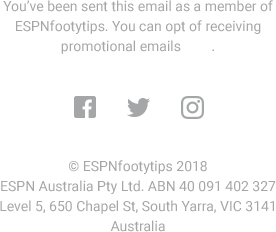
<style>
.page{position:relative;width:276px;height:232px;background:#ffffff}
.page>*{position:absolute;margin:0}
.t1{font:14px/20px "Roboto-Regular";color:#a5a6a7}
.t2{font:14px/20px "Roboto-Regular";color:#ffffff}
</style>
<div class="page">
<p class="t1" style="left:3px;top:0px;width:270px;height:54px;text-align:center">You’ve been sent this email as a member of ESPNfootytips. You can opt of receiving promotional emails <span class="t2">here</span>.</p>
<p class="t1" style="left:0px;top:160px;width:276px;height:72px;text-align:center">© ESPNfootytips 2018<br>ESPN Australia Pty Ltd. ABN 40 091 402 327<br>Level 5, 650 Chapel St, South Yarra, VIC 3141 Australia</p>
</div>
